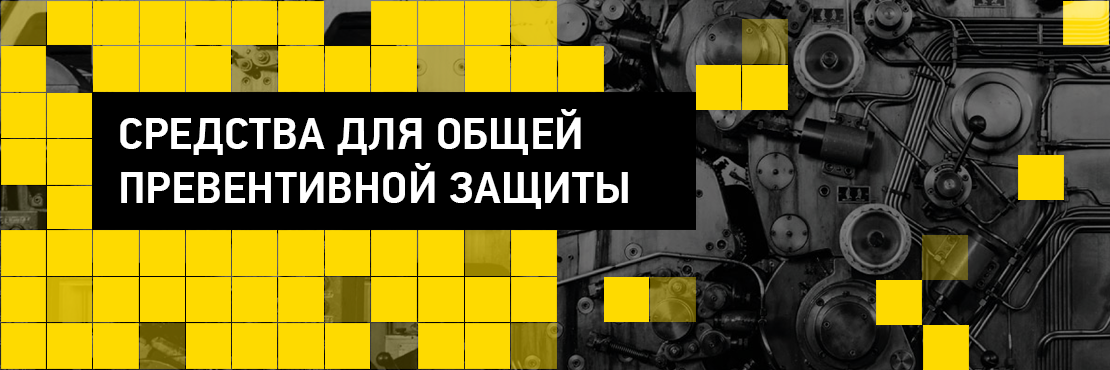
<style>
.page{position:relative;width:1110px;height:370px;background:#feda00}
.page>*{position:absolute;margin:0}
.t1{font:44.6px "PFDinTextCondPro-Medium";color:#ffffff;text-transform:uppercase;scale:1.15 1}
</style>
<div class="page">
<p class="t1" style="left:120px;top:109px;width:508px;height:100px">Cредства для общей<br>превентивной защиты</p>
</div>
